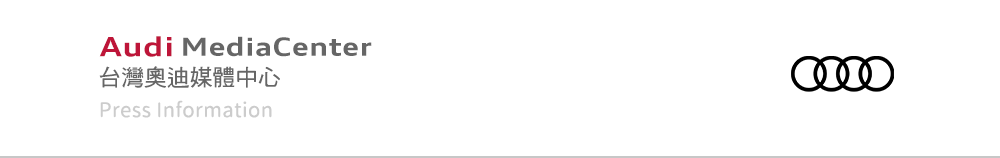
<style>
.page{position:relative;width:1000px;height:158px;background:#ffffff}
.page>*{position:absolute;margin:0}
.t1{font:26.5px "AudiType-Bold";letter-spacing:0.02em;color:#be1539;scale:1.23 1}
.t2{font:24.9px "AudiType-Bold";letter-spacing:0.02em;color:#666666;scale:1.22 1}
.t3{font:22.8px "DFHei-W5-WINP-BF";color:#666666}
.t4{font:20.2px "GenSenMaruGothicTW-Regular-TTF";letter-spacing:0.02em;color:#cccccc}
</style>
<div class="page">
<p class="t1" style="left:99px;top:36px;width:73px;height:21px">Audi</p>
<p class="t2" style="left:183px;top:36px;width:189px;height:21px">MediaCenter</p>
<p class="t3" style="left:99px;top:66px;width:181px;height:22px">台灣奧迪媒體中心</p>
<p class="t4" style="left:100px;top:100px;width:172px;height:18px">Press Information</p>
</div>
